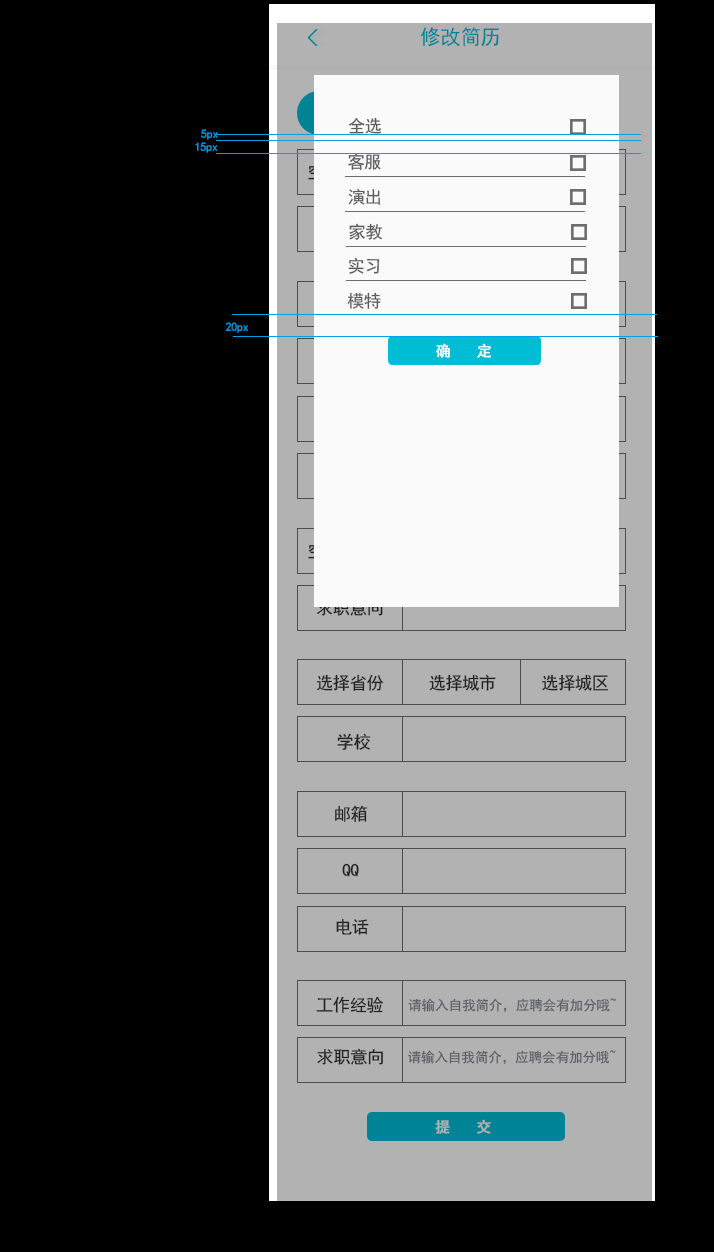
<style>
.page{position:relative;width:714px;height:1252px;background:#000000}
.page>*{position:absolute;margin:0}
.t1{font:20.6px "SimHei";letter-spacing:-0.02em;color:#008394}
.t2{font:17.2px "SimHei";letter-spacing:-0.02em;color:#5d5d5d}
.t3{font:12px "SimHei";letter-spacing:-0.02em;color:#00a0e9}
.t4{font:14.9px "SimHei";letter-spacing:0.02em;color:#ffffff;font-weight:bold}
.t5{font:17.2px "SimHei";letter-spacing:-0.02em}
.t6{font:17.2px "SimHei";letter-spacing:-0.02em;color:#2e3031}
.t7{font:13.7px "SimHei";letter-spacing:-0.02em;color:#595e66}
.t8{font:14.9px "SimHei";letter-spacing:0.02em;color:#b2b2b2;font-weight:bold}
</style>
<div class="page">
<p class="t1" style="left:420px;top:27px;width:79px;height:20px">修改简历</p>
<p class="t2" style="left:348px;top:117px;width:33px;height:17px">全选</p>
<p class="t3" style="left:201px;top:129px;width:17px;height:11px">5px</p>
<p class="t3" style="left:195px;top:142px;width:23px;height:11px">15px</p>
<p class="t2" style="left:348px;top:153px;width:33px;height:17px">客服</p>
<p class="t2" style="left:348px;top:188px;width:33px;height:17px">演出</p>
<p class="t2" style="left:349px;top:223px;width:34px;height:17px">家教</p>
<p class="t2" style="left:348px;top:257px;width:32px;height:17px">实习</p>
<p class="t2" style="left:347px;top:292px;width:34px;height:17px">模特</p>
<p class="t3" style="left:225px;top:322px;width:23px;height:11px">20px</p>
<p class="t4" style="left:436px;top:343px;width:55px;height:15px">确  定</p>
<p class="t5" style="left:317px;top:599px;width:66px;height:17px">求职意向</p>
<p class="t6" style="left:316px;top:674px;width:68px;height:17px">选择省份</p>
<p class="t6" style="left:429px;top:674px;width:67px;height:17px">选择城市</p>
<p class="t6" style="left:542px;top:674px;width:67px;height:17px">选择城区</p>
<p class="t6" style="left:337px;top:733px;width:34px;height:17px">学校</p>
<p class="t6" style="left:335px;top:805px;width:33px;height:17px">邮箱</p>
<p class="t6" style="left:342px;top:863px;width:17px;height:14px">QQ</p>
<p class="t6" style="left:336px;top:918px;width:33px;height:17px">电话</p>
<p class="t6" style="left:316px;top:996px;width:67px;height:17px">工作经验</p>
<p class="t7" style="left:408px;top:998px;width:208px;height:15px">请输入自我简介，应聘会有加分哦~</p>
<p class="t6" style="left:317px;top:1048px;width:66px;height:17px">求职意向</p>
<p class="t7" style="left:407px;top:1050px;width:209px;height:15px">请输入自我简介，应聘会有加分哦~</p>
<p class="t8" style="left:435px;top:1119px;width:56px;height:15px">提  交</p>
</div>
